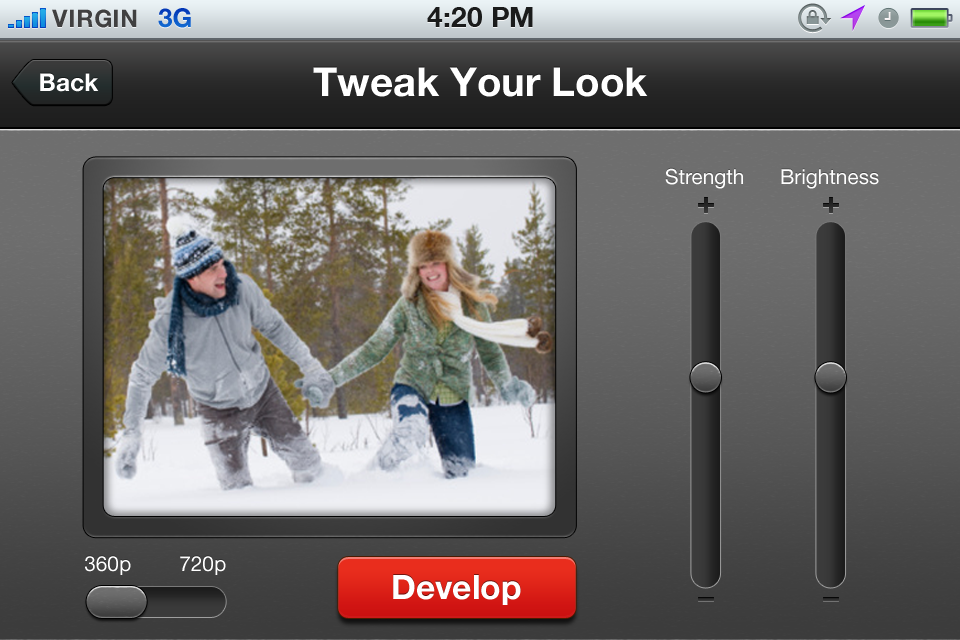
<style>
.page{position:relative;width:960px;height:640px}
.page>*{position:absolute;margin:0}
.t1{font:24.5px "HelveticaNeue-Bold";color:#ffffff}
.t2{font:40px "HelveticaNeue-Bold";color:#ffffff}
.t3{font:20.8px "HelveticaNeue";color:#ffffff}
.t4{font:33.6px "HelveticaNeue-Bold";color:#ffffff}
</style>
<div class="page">
<p class="t1" style="left:40px;top:73px;width:59px;height:19px">Back</p>
<p class="t2" style="left:313px;top:67px;width:335px;height:30px">Tweak Your Look</p>
<p class="t3" style="left:665px;top:168px;width:78px;height:21px">Strength</p>
<p class="t3" style="left:781px;top:169px;width:98px;height:20px">Brightness</p>
<p class="t3" style="left:85px;top:556px;width:46px;height:19px">360p</p>
<p class="t3" style="left:180px;top:556px;width:46px;height:19px">720p</p>
<p class="t4" style="left:393px;top:575px;width:128px;height:30px">Develop</p>
</div>
